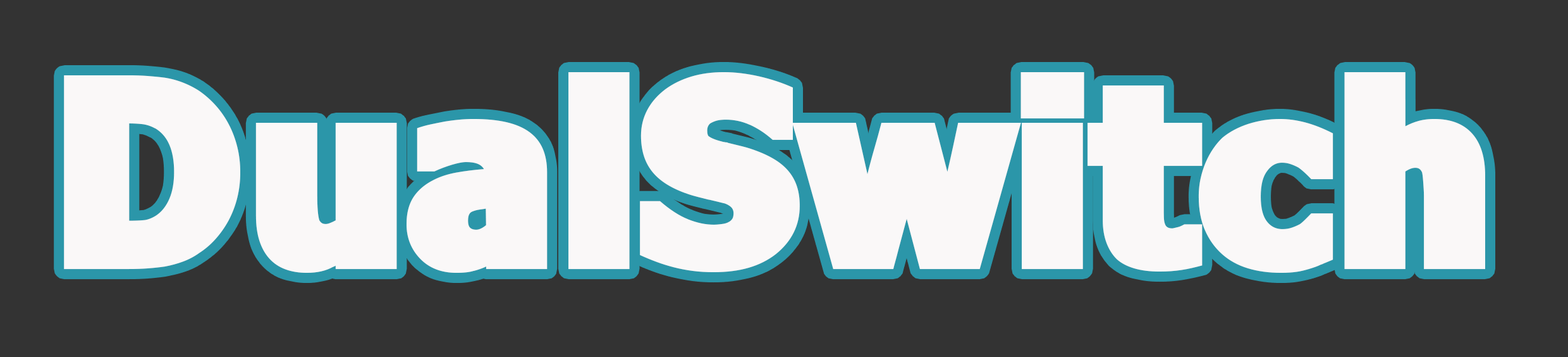
<style>
.page{position:relative;width:1568px;height:357px;background:#333333}
.page>*{position:absolute;margin:0}
.t1{font:266.1px "Fava-Black";color:#faf8f8}
</style>
<div class="page">
<p class="t1" style="left:64px;top:72px;width:1421px;height:201px">DualSwitch</p>
</div>
